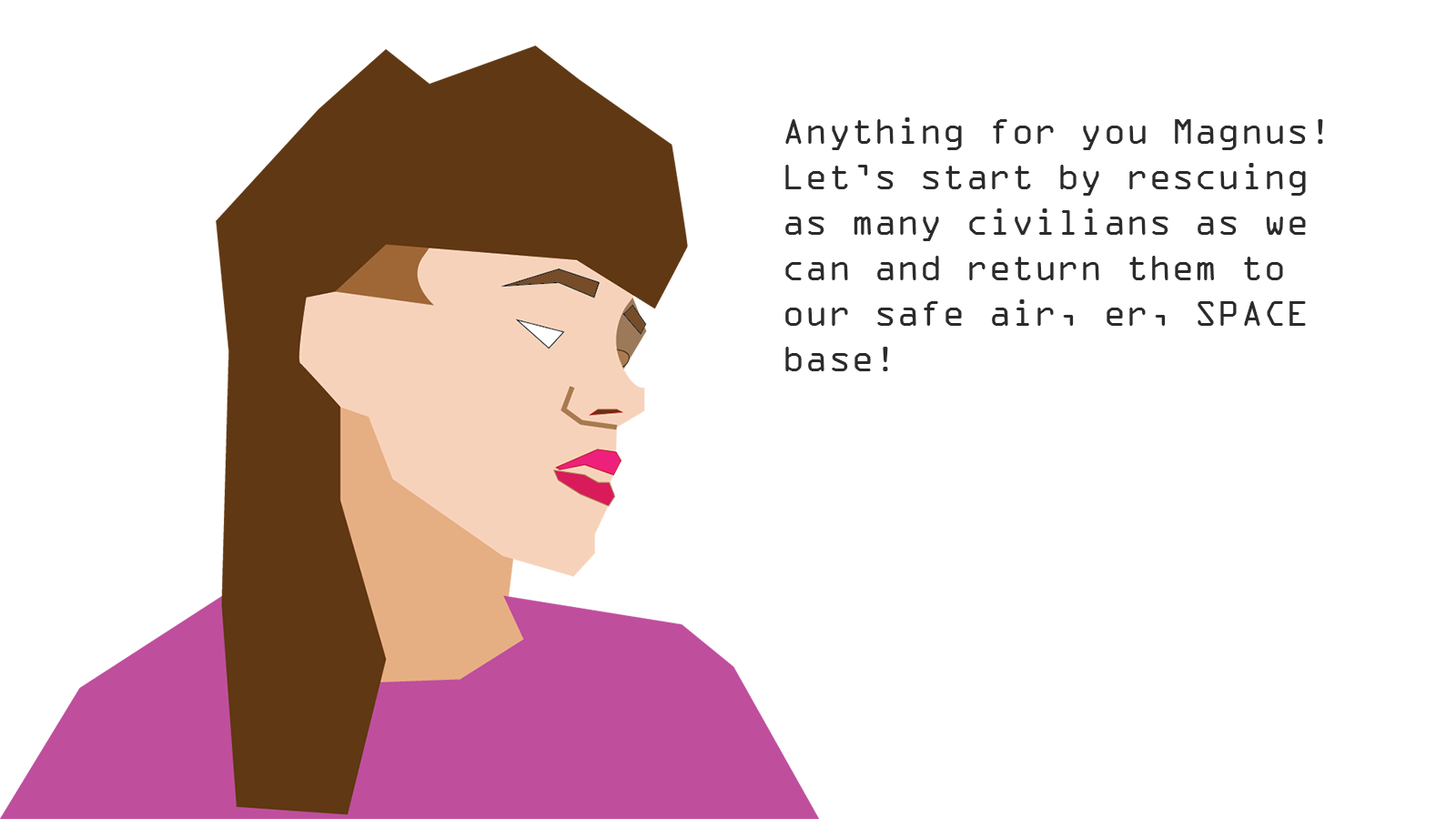
<style>
.page{position:relative;width:1456px;height:819px;background:#ffffff}
.page>*{position:absolute;margin:0}
.t1{font:37.9px "OCRAExtended";color:#2b2b2b}
</style>
<div class="page">
<p class="t1" style="left:785px;top:117px;width:538px;height:254px">Anything for you Magnus! Let’s start by rescuing as many civilians as we can and return them to our safe air, er, SPACE base!</p>
</div>
